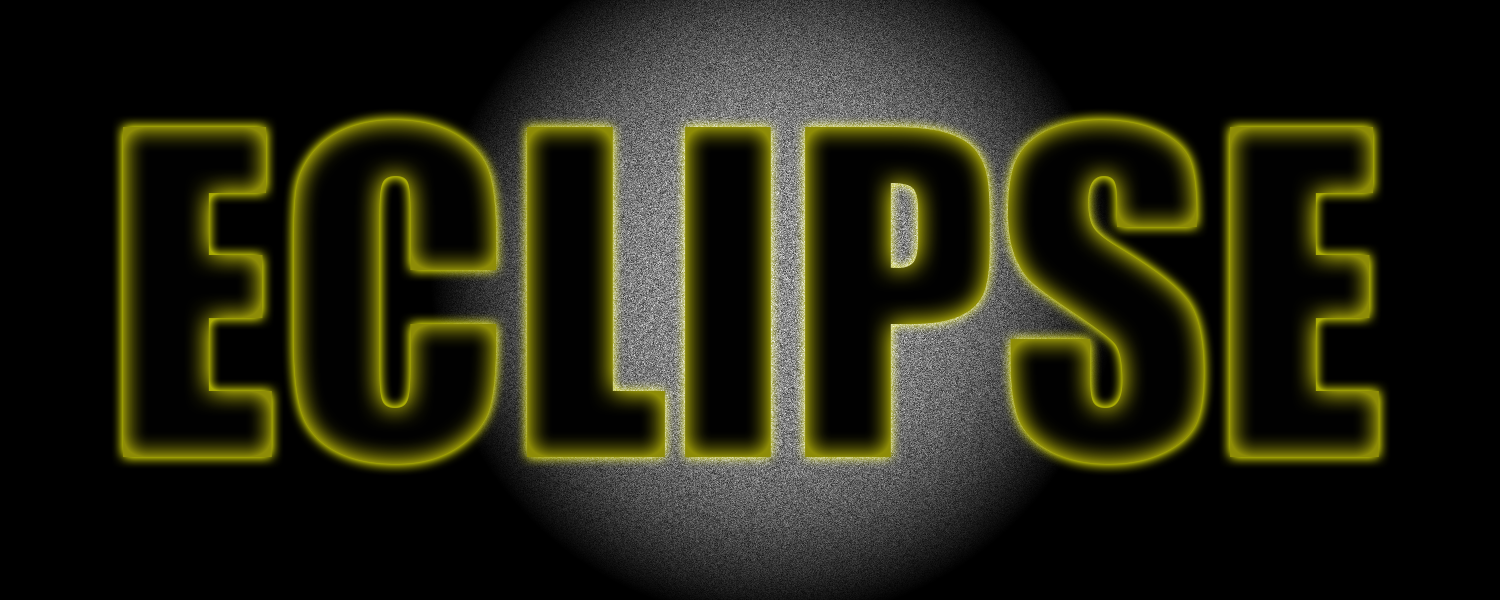
<style>
.page{position:relative;width:1500px;height:600px;background:#000000}
.page>*{position:absolute;margin:0}
.t1{font:416.7px "Impact"}
</style>
<div class="page">
<p class="t1" style="left:123px;top:120px;width:1256px;height:344px">ECLIPSE</p>
</div>
